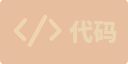
<style>
.page{position:relative;width:128px;height:64px;background:#e7bf9f}
.page>*{position:absolute;margin:0}
.t1{font:24px "SourceHanSansCN-Heavy";color:#ebd5b1}
</style>
<div class="page">
<p class="t1" style="left:69px;top:20px;width:48px;height:23px">代码</p>
</div>
